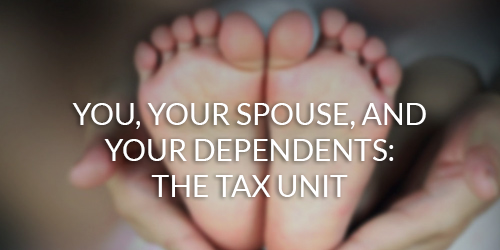
<style>
.page{position:relative;width:500px;height:250px}
.page>*{position:absolute;margin:0}
.t1{font:30px "Lato-Regular";color:#ffffff;text-transform:uppercase}
</style>
<div class="page">
<p class="t1" style="left:72px;top:103px;width:354px;height:94px;text-align:center">You, your spouse, and <br>your dependents: <br>The tax unit</p>
</div>
